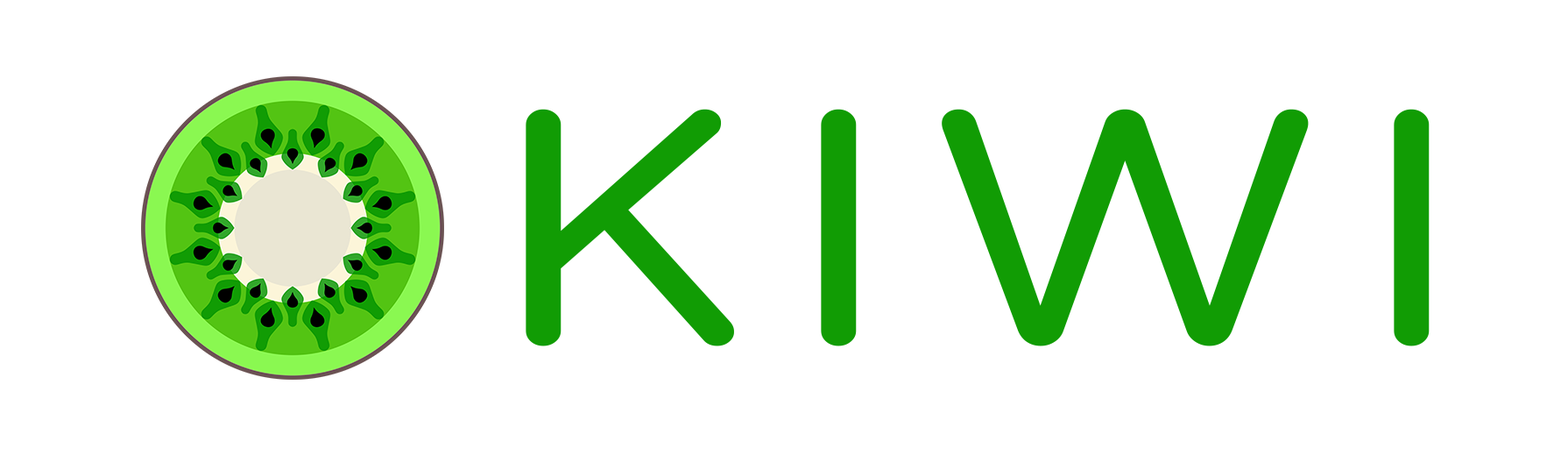
<style>
.page{position:relative;width:1568px;height:456px;background:#ffffff}
.page>*{position:absolute;margin:0}
.t1{font:333.6px "VarelaRound-Regular";letter-spacing:0.1em;color:#119c04;scale:1.15 1}
</style>
<div class="page">
<p class="t1" style="left:526px;top:109px;width:904px;height:237px">KIWI</p>
</div>
